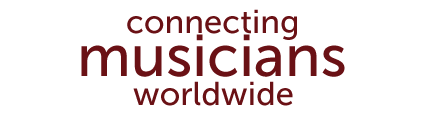
<style>
.page{position:relative;width:425px;height:120px;background:#ffffff}
.page>*{position:absolute;margin:0}
.t1{font:32.8px "MuseoSans-500";color:#6a1115}
.t2{font:58.8px "MuseoSans-500";color:#6a1115}
</style>
<div class="page">
<p class="t1" style="left:127px;top:9px;width:170px;height:31px">connecting</p>
<p class="t2" style="left:81px;top:34px;width:264px;height:43px">musicians</p>
<p class="t1" style="left:133px;top:81px;width:160px;height:25px">worldwide</p>
</div>
